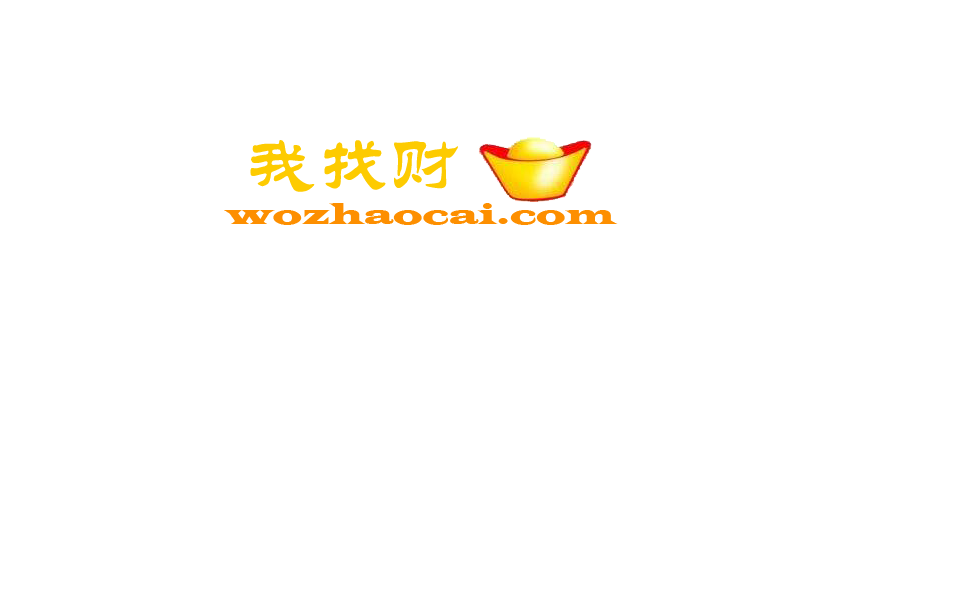
<style>
.page{position:relative;width:978px;height:594px;background:#ffffff}
.page>*{position:absolute;margin:0}
.t1{font:72px "STLiti";color:#fdcb01}
.t2{font:30px "LatinWide";color:#fd8f00}
</style>
<div class="page">
<p class="t1" style="left:250px;top:140px;width:208px;height:52px">我找财</p>
<p class="t2" style="left:224px;top:203px;width:394px;height:22px">wozhaocai.com</p>
</div>
